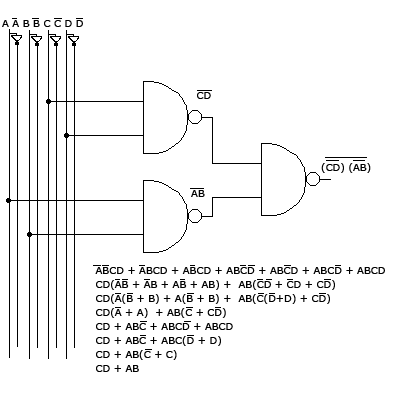
<style>
.page{position:relative;width:400px;height:400px;background:#ffffff}
.page>*{position:absolute;margin:0}
.t1{font:10px "Verdana";color:#000000}
.t2{font:10px/14px "Verdana";color:#000000}
</style>
<div class="page">
<p class="t1" style="left:2px;top:20px;width:81px;height:7px">A A B B C C D D</p>
<p class="t1" style="left:197px;top:92px;width:14px;height:7px">CD</p>
<p class="t1" style="left:321px;top:163px;width:50px;height:10px">(CD) (AB)</p>
<p class="t1" style="left:191px;top:190px;width:14px;height:7px">AB</p>
<p class="t2" style="left:95px;top:267px;width:290px;height:105px">ABCD + ABCD + ABCD + ABCD + ABCD + ABCD + ABCD<br>CD(AB + AB + AB + AB) +  AB(CD + CD + CD)<br>CD(A(B + B) + A(B + B) +  AB(C(D+D) + CD)<br>CD(A + A)  + AB(C + CD)<br>CD + ABC + ABCD + ABCD<br>CD + ABC + ABC(D + D)<br>CD + AB(C + C)<br>CD + AB</p>
</div>
